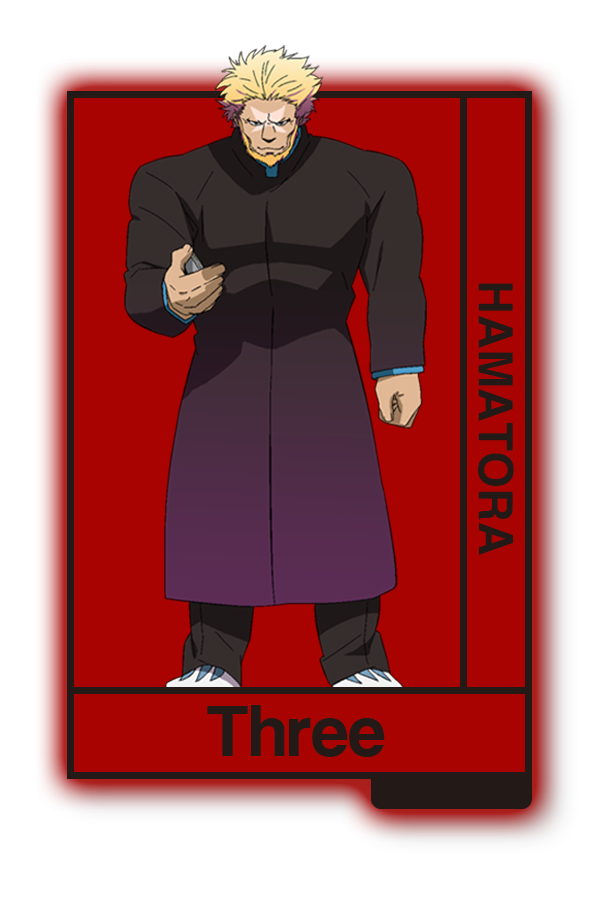
<style>
.page{position:relative;width:600px;height:900px;background:#a80301}
.page>*{position:absolute;margin:0}
.t1{font:47.4px "Helvetica-Bold";color:#231917}
.t2{font:75px "CoolveticaRg-Regular";color:#231917}
</style>
<div class="page">
<p class="t1" style="left:478px;top:283px;width:36px;height:272px;rotate:90deg">HAMATORA</p>
<p class="t2" style="left:207px;top:705px;width:178px;height:52px">Three</p>
</div>
